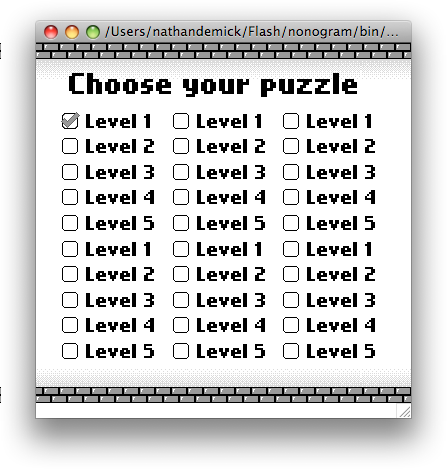
<style>
.page{position:relative;width:447px;height:469px;background:#ffffff}
.page>*{position:absolute;margin:0}
.t1{font:24px "NokiaCellphoneFC-Small";color:#000000}
.t2{font:16px "NokiaCellphoneFC-Small";color:#000000}
</style>
<div class="page">
<p class="t1" style="left:69px;top:73px;width:288px;height:24px">Choose your puzzle</p>
<p class="t2" style="left:86px;top:114px;width:64px;height:14px">Level 1</p>
<p class="t2" style="left:197px;top:114px;width:64px;height:14px">Level 1</p>
<p class="t2" style="left:307px;top:114px;width:64px;height:14px">Level 1</p>
<p class="t2" style="left:86px;top:139px;width:68px;height:14px">Level 2</p>
<p class="t2" style="left:197px;top:139px;width:68px;height:14px">Level 2</p>
<p class="t2" style="left:307px;top:139px;width:68px;height:14px">Level 2</p>
<p class="t2" style="left:86px;top:165px;width:68px;height:14px">Level 3</p>
<p class="t2" style="left:197px;top:165px;width:68px;height:14px">Level 3</p>
<p class="t2" style="left:307px;top:165px;width:68px;height:14px">Level 3</p>
<p class="t2" style="left:86px;top:190px;width:68px;height:14px">Level 4</p>
<p class="t2" style="left:197px;top:190px;width:68px;height:14px">Level 4</p>
<p class="t2" style="left:307px;top:190px;width:68px;height:14px">Level 4</p>
<p class="t2" style="left:86px;top:216px;width:68px;height:14px">Level 5</p>
<p class="t2" style="left:197px;top:216px;width:68px;height:14px">Level 5</p>
<p class="t2" style="left:307px;top:216px;width:68px;height:14px">Level 5</p>
<p class="t2" style="left:86px;top:242px;width:64px;height:14px">Level 1</p>
<p class="t2" style="left:197px;top:242px;width:64px;height:14px">Level 1</p>
<p class="t2" style="left:307px;top:242px;width:64px;height:14px">Level 1</p>
<p class="t2" style="left:86px;top:267px;width:68px;height:14px">Level 2</p>
<p class="t2" style="left:197px;top:267px;width:68px;height:14px">Level 2</p>
<p class="t2" style="left:307px;top:267px;width:68px;height:14px">Level 2</p>
<p class="t2" style="left:86px;top:293px;width:68px;height:14px">Level 3</p>
<p class="t2" style="left:197px;top:293px;width:68px;height:14px">Level 3</p>
<p class="t2" style="left:307px;top:293px;width:68px;height:14px">Level 3</p>
<p class="t2" style="left:86px;top:318px;width:68px;height:14px">Level 4</p>
<p class="t2" style="left:197px;top:318px;width:68px;height:14px">Level 4</p>
<p class="t2" style="left:307px;top:318px;width:68px;height:14px">Level 4</p>
<p class="t2" style="left:86px;top:344px;width:68px;height:14px">Level 5</p>
<p class="t2" style="left:197px;top:344px;width:68px;height:14px">Level 5</p>
<p class="t2" style="left:307px;top:344px;width:68px;height:14px">Level 5</p>
</div>
